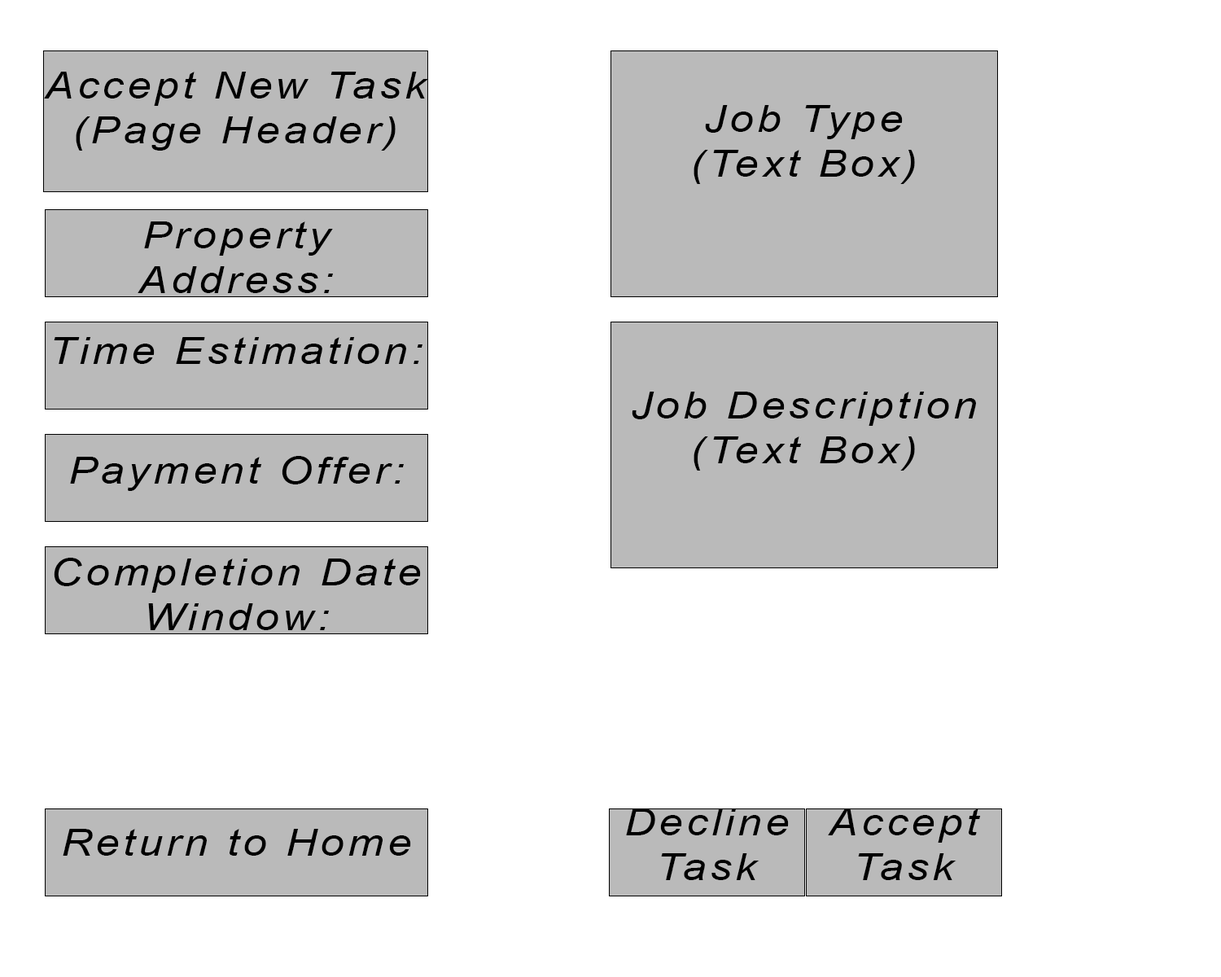
<style>
.page{position:relative;width:1221px;height:977px;background:#ffffff}
.page>*{position:absolute;margin:0}
.t1{font:37.3px "Arial-ItalicMT";letter-spacing:0.08em;color:#000000;scale:1.16 1}
</style>
<div class="page">
<p class="t1" style="left:44px;top:72px;width:385px;height:79px;text-align:center">Accept New Task<br>(Page Header)</p>
<p class="t1" style="left:693px;top:105px;width:222px;height:79px;text-align:center">Job Type<br>(Text Box)</p>
<p class="t1" style="left:138px;top:221px;width:195px;height:72px;text-align:center">Property Address:</p>
<p class="t1" style="left:54px;top:337px;width:368px;height:27px">Time Estimation:</p>
<p class="t1" style="left:632px;top:391px;width:344px;height:79px;text-align:center">Job Description<br>(Text Box)</p>
<p class="t1" style="left:70px;top:456px;width:334px;height:35px">Payment Offer:</p>
<p class="t1" style="left:54px;top:558px;width:367px;height:72px;text-align:center">Completion Date Window:</p>
<p class="t1" style="left:626px;top:808px;width:163px;height:72px;text-align:center">Decline Task</p>
<p class="t1" style="left:828px;top:808px;width:153px;height:72px;text-align:center">Accept Task</p>
<p class="t1" style="left:63px;top:829px;width:348px;height:26px">Return to Home</p>
</div>
